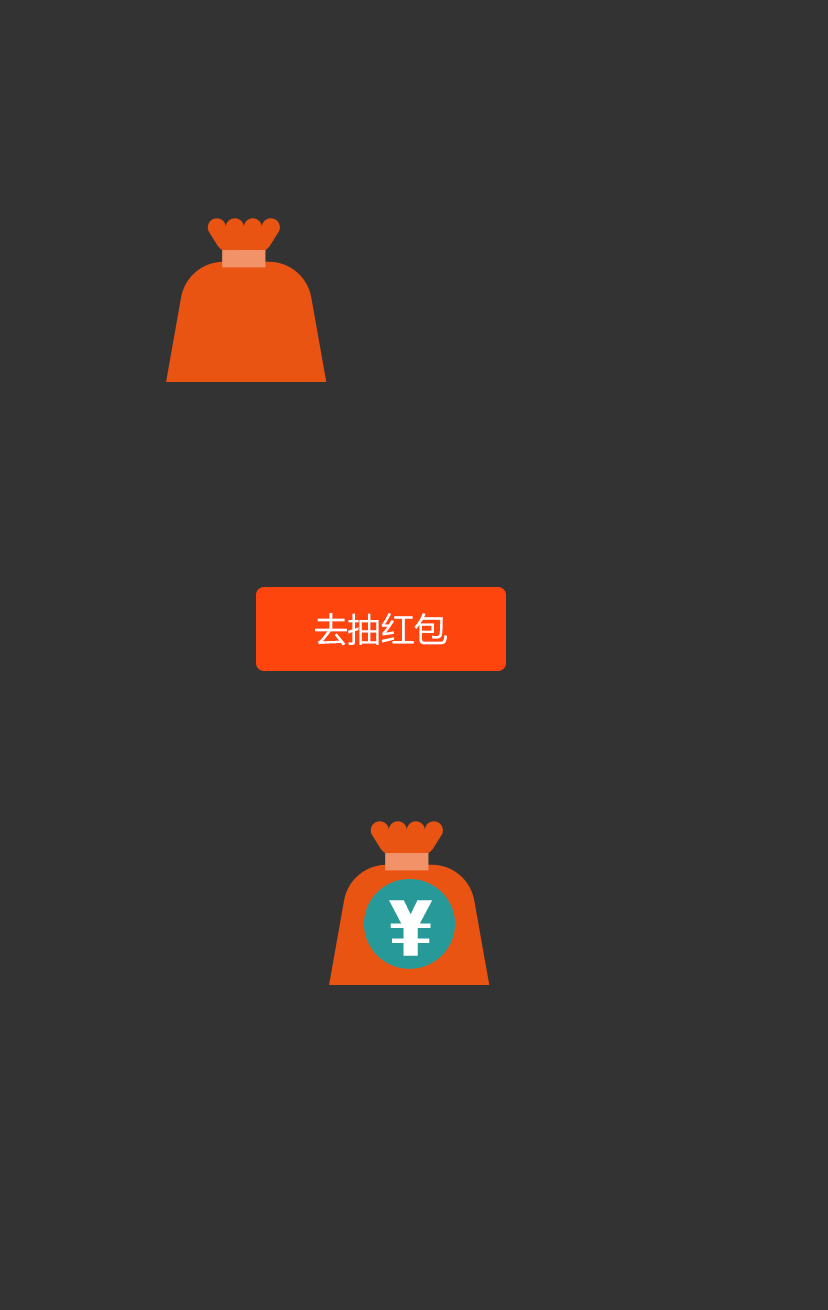
<style>
.page{position:relative;width:828px;height:1310px;background:#333333}
.page>*{position:absolute;margin:0}
.t1{font:33.3px "MicrosoftYaHei";color:#ffffff}
</style>
<div class="page">
<p class="t1" style="left:315px;top:613px;width:132px;height:33px">去抽红包</p>
</div>
